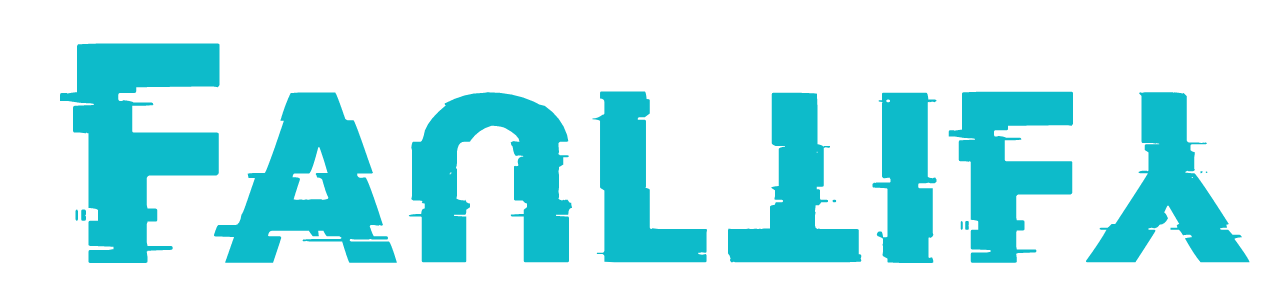
<style>
.page{position:relative;width:1280px;height:300px;background:#ffffff}
.page>*{position:absolute;margin:0}
.t1{font:244px "DoctorGlitch";color:#0dbbca}
.t2{font:190px "DoctorGlitch";color:#0dbbca}
</style>
<div class="page">
<p class="t1" style="left:60px;top:43px;width:160px;height:220px">F</p>
<p class="t2" style="left:213px;top:92px;width:184px;height:171px">A</p>
<p class="t2" style="left:408px;top:92px;width:164px;height:171px;rotate:-180deg">U</p>
<p class="t2" style="left:592px;top:91px;width:115px;height:172px">L</p>
<p class="t2" style="left:728px;top:92px;width:134px;height:171px;rotate:180deg">T</p>
<p class="t2" style="left:872px;top:92px;width:65px;height:171px">I</p>
<p class="t2" style="left:948px;top:91px;width:125px;height:172px">F</p>
<p class="t2" style="left:1086px;top:92px;width:164px;height:171px;rotate:180deg">Y</p>
</div>
